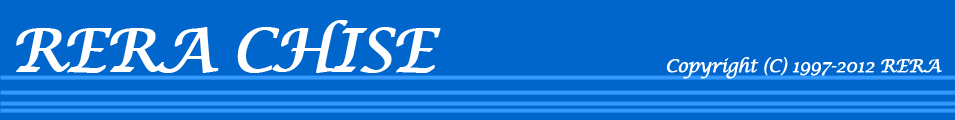
<style>
.page{position:relative;width:955px;height:120px;background:#0066cc}
.page>*{position:absolute;margin:0}
.t1{font:60px "LucidaCalligraphy-Italic";letter-spacing:-0.05em;color:#ffffff;font-weight:bold}
.t2{font:18px "LucidaCalligraphy-Italic";letter-spacing:-0.05em;color:#ffffff;font-weight:bold}
</style>
<div class="page">
<p class="t1" style="left:16px;top:20px;width:425px;height:53px">RERA CHISE</p>
<p class="t2" style="left:667px;top:57px;width:275px;height:22px">Copyright (C) 1997-2012 RERA</p>
</div>
